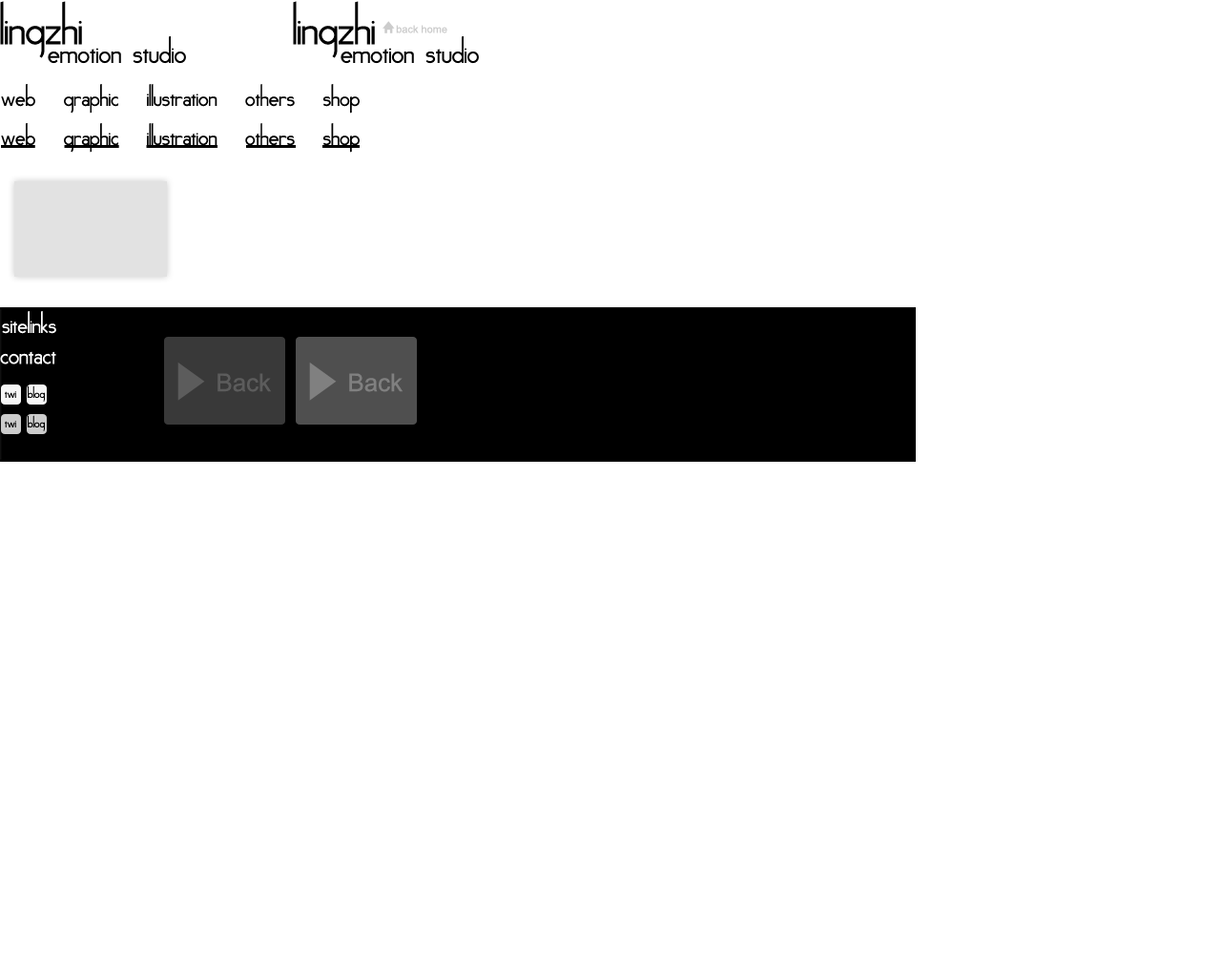
<style>
.page{position:relative;width:1221px;height:977px;background:#ffffff}
.page>*{position:absolute;margin:0}
.t1{font:44.8px "Noir-et-Blanc";color:#010101}
.t2{font:10.5px "ArialMT";color:#cccccc}
.t3{font:27.8px "Noir-et-Blanc";color:#010101}
.t4{font:22.9px "Noir-et-Blanc";color:#000000}
.t5{font:22.9px "Noir-et-Blanc";color:#ffffff}
.t6{font:24.3px "Noir-et-Blanc";color:#ffffff}
.t7{font:24.6px "ArialMT";color:#5c5c5c}
.t8{font:24.6px "ArialMT";color:#808080}
.t9{font:12.1px "Noir-et-Blanc";color:#000000}
</style>
<div class="page">
<p class="t1" style="left:0px;top:1px;width:82px;height:57px">lingzhi</p>
<p class="t1" style="left:293px;top:1px;width:82px;height:57px">lingzhi</p>
<p class="t2" style="left:396px;top:25px;width:51px;height:8px">back home</p>
<p class="t3" style="left:48px;top:36px;width:138px;height:28px">emotion studio</p>
<p class="t3" style="left:341px;top:36px;width:138px;height:28px">emotion studio</p>
<p class="t4" style="left:1px;top:84px;width:359px;height:30px">web   graphic   illustration   others   shop</p>
<p class="t4" style="left:1px;top:123px;width:359px;height:30px">web   graphic   illustration   others   shop</p>
<p class="t5" style="left:2px;top:311px;width:54px;height:23px">sitelinks</p>
<p class="t6" style="left:0px;top:351px;width:56px;height:13px">contact</p>
<p class="t7" style="left:217px;top:373px;width:54px;height:19px">Back</p>
<p class="t8" style="left:349px;top:373px;width:54px;height:19px">Back</p>
<p class="t9" style="left:28px;top:385px;width:17px;height:17px">blog</p>
<p class="t9" style="left:5px;top:391px;width:11px;height:7px">twi</p>
<p class="t9" style="left:5px;top:421px;width:11px;height:6px">twi</p>
<p class="t9" style="left:28px;top:415px;width:17px;height:16px">blog</p>
</div>
